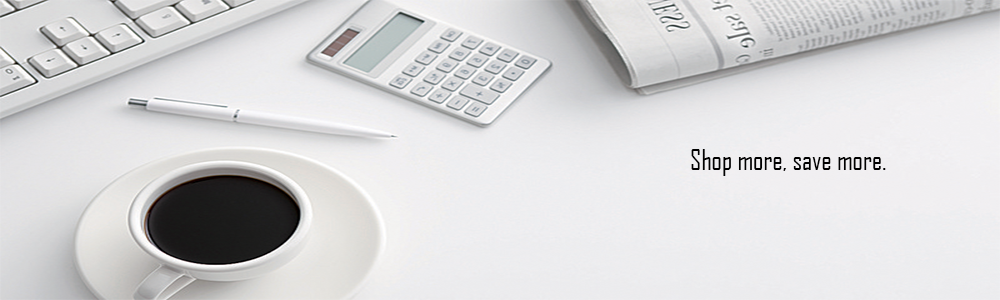
<style>
.page{position:relative;width:1000px;height:300px}
.page>*{position:absolute;margin:0}
.t1{font:27.1px "AgencyFB-Reg";color:#000000}
</style>
<div class="page">
<p class="t1" style="left:691px;top:149px;width:195px;height:27px">Shop more, save more.</p>
</div>
